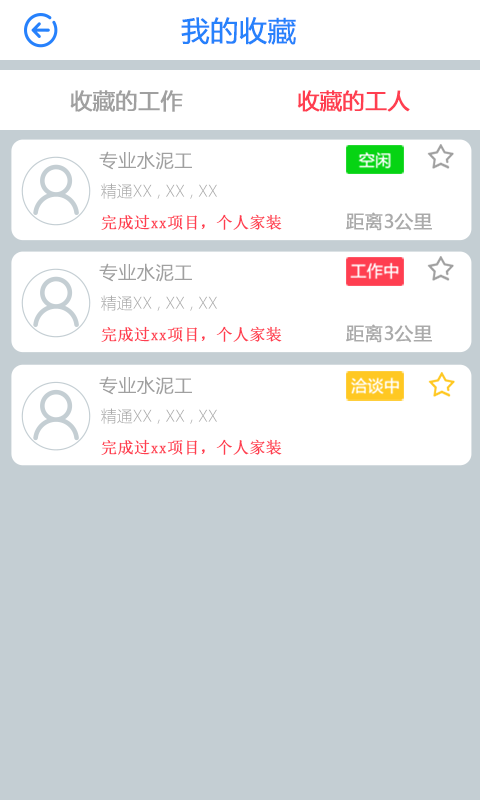
<style>
.page{position:relative;width:480px;height:800px;background:#c4ced3}
.page>*{position:absolute;margin:0}
.t1{font:28px "MicrosoftYaHei";color:#2681fc;font-weight:bold}
.t2{font:22px "MicrosoftYaHei";color:#a0a0a0;font-weight:bold}
.t3{font:22px "MicrosoftYaHei";color:#ff3e50;font-weight:bold}
.t4{font:18.3px "MicrosoftYaHeiLight";color:#a0a0a0;font-weight:bold}
.t5{font:16px "MicrosoftYaHeiLight";color:#aaaaaa}
.t6{font:16px "SimSun";color:#ff3e50;font-weight:bold}
.t7{font:18.3px "MicrosoftYaHei";color:#aaaaaa;font-weight:bold}
</style>
<div class="page">
<p class="t1" style="left:181px;top:17px;width:115px;height:28px">我的收藏</p>
<p class="t2" style="left:70px;top:90px;width:113px;height:22px">收藏的工作</p>
<p class="t3" style="left:297px;top:90px;width:113px;height:22px">收藏的工人</p>
<p class="t4" style="left:99px;top:151px;width:93px;height:19px">专业水泥工</p>
<p class="t5" style="left:101px;top:183px;width:116px;height:16px">精通XX , XX , XX</p>
<p class="t6" style="left:101px;top:214px;width:181px;height:16px">完成过xx项目，个人家装</p>
<p class="t7" style="left:346px;top:212px;width:86px;height:19px">距离3公里</p>
<p class="t4" style="left:99px;top:263px;width:93px;height:19px">专业水泥工</p>
<p class="t5" style="left:101px;top:295px;width:116px;height:16px">精通XX , XX , XX</p>
<p class="t6" style="left:101px;top:326px;width:181px;height:16px">完成过xx项目，个人家装</p>
<p class="t7" style="left:346px;top:324px;width:86px;height:19px">距离3公里</p>
<p class="t4" style="left:99px;top:376px;width:93px;height:19px">专业水泥工</p>
<p class="t5" style="left:101px;top:408px;width:116px;height:16px">精通XX , XX , XX</p>
<p class="t6" style="left:101px;top:439px;width:181px;height:16px">完成过xx项目，个人家装</p>
</div>
